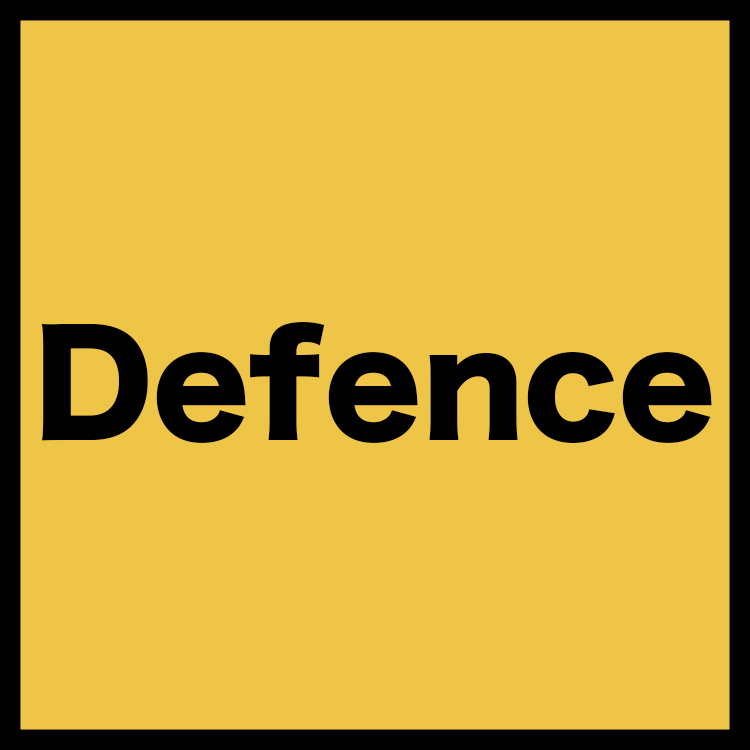
<style>
.page{position:relative;width:750px;height:750px;background:#eec547}
.page>*{position:absolute;margin:0}
.t1{font:140px "HiraKakuStdN-W8";color:#000000}
</style>
<div class="page">
<p class="t1" style="left:41px;top:322px;width:671px;height:122px">Defence</p>
</div>
